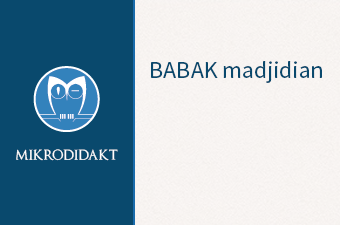
<style>
.page{position:relative;width:340px;height:225px;background:#09496d}
.page>*{position:absolute;margin:0}
.t1{font:24px "SourceSansPro-Regular";color:#09496d}
.t2{font:18px "OptimusPrinceps";color:#ffffff}
</style>
<div class="page">
<p class="t1" style="left:151px;top:61px;width:171px;height:22px">BABAK madjidian</p>
<p class="t2" style="left:16px;top:149px;width:102px;height:12px">mikrodidakt</p>
</div>
